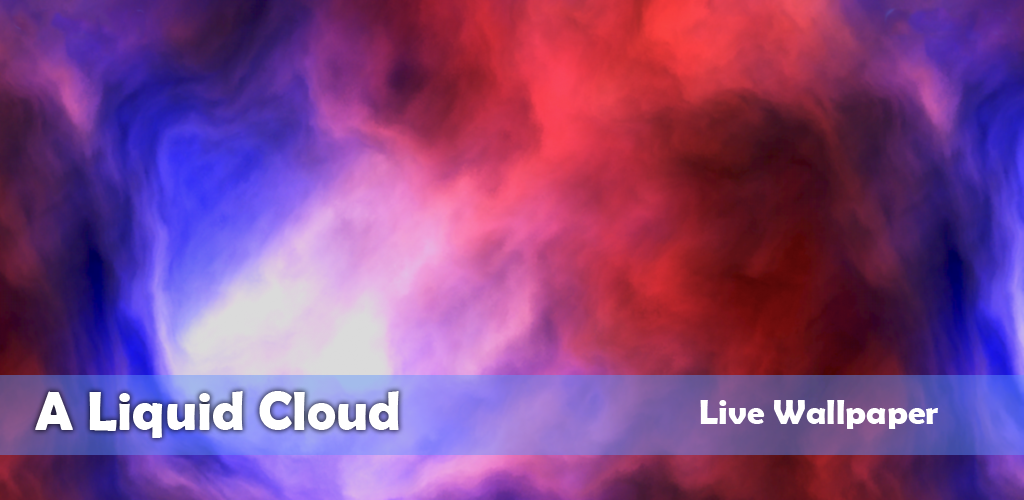
<style>
.page{position:relative;width:1024px;height:500px}
.page>*{position:absolute;margin:0}
.t1{font:55px "BerlinSansFBDemi-Bold";color:#ffffff}
.t2{font:35px "BerlinSansFBDemi-Bold";color:#ffffff}
</style>
<div class="page">
<p class="t1" style="left:35px;top:391px;width:364px;height:47px">A Liquid Cloud</p>
<p class="t2" style="left:700px;top:400px;width:238px;height:29px">Live Wallpaper</p>
</div>
